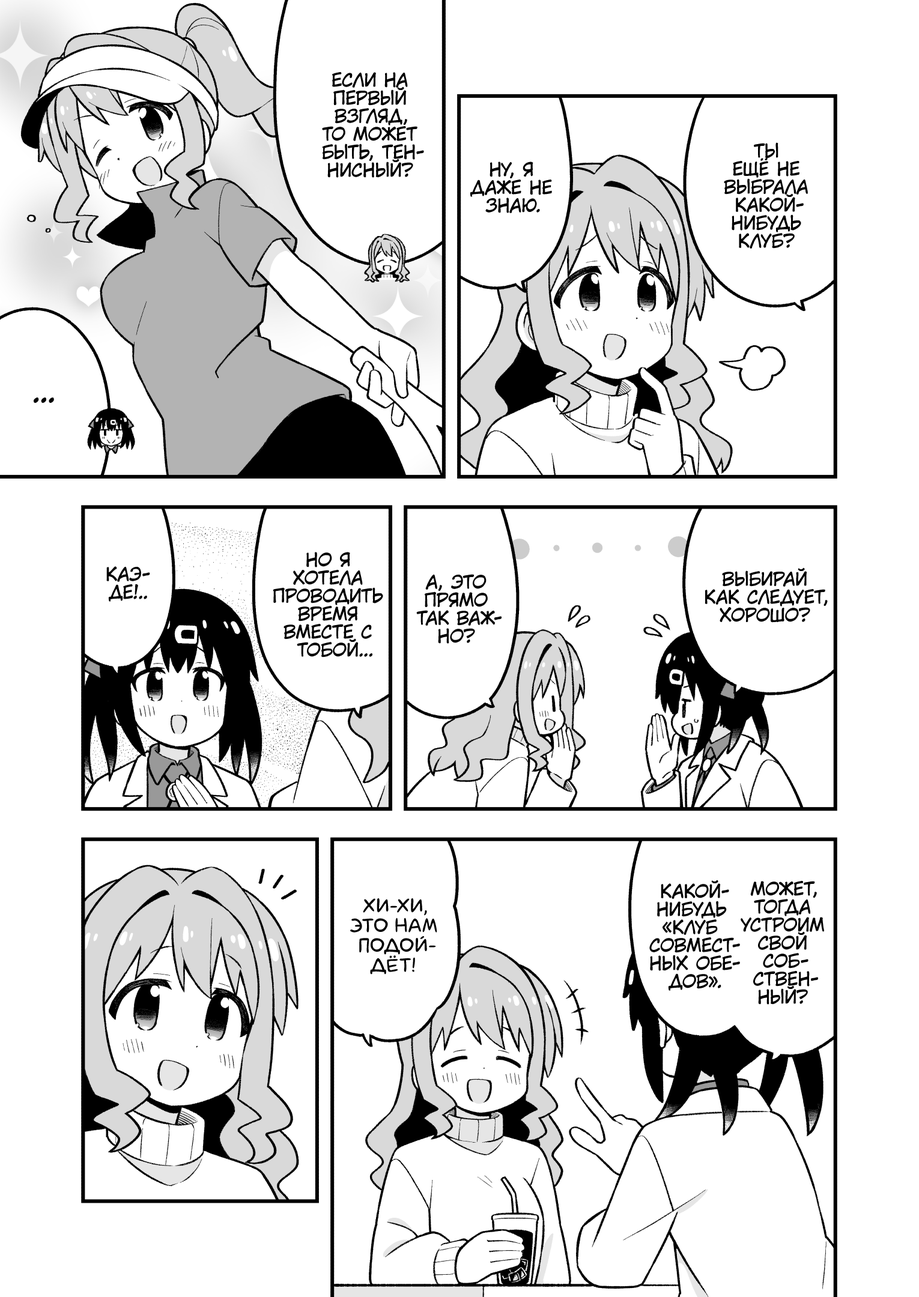
<style>
.page{position:relative;width:919px;height:1297px;background:#ffffff}
.page>*{position:absolute;margin:0}
.t1{font:18px "KuraiVoice2";color:#000000;text-transform:uppercase}
.t2{font:28.8px "KuraiVoice2";color:#000000;text-transform:uppercase}
.t3{font:19.8px "laCartoonerie";color:#000000;text-transform:uppercase}
</style>
<div class="page">
<p class="t1" style="left:322px;top:72px;width:102px;height:106px;text-align:center">Если на<br>первый<br>взгляд,<br>то может<br>быть, тен-<br>нисный?</p>
<p class="t1" style="left:724px;top:142px;width:84px;height:107px;text-align:center">Ты<br>ещё не<br>выбрала<br>какой-<br>нибудь<br>клуб?</p>
<p class="t1" style="left:470px;top:162px;width:82px;height:51px;text-align:center">Ну, я<br>даже не<br>знаю.</p>
<p class="t2" style="left:34px;top:398px;width:20px;height:5px">...</p>
<p class="t1" style="left:273px;top:552px;width:110px;height:106px;text-align:center">Но я<br>хотела<br>проводить<br>время<br>вместе с<br>тобой...</p>
<p class="t1" style="left:106px;top:566px;width:44px;height:36px;text-align:center">Каэ-<br>де!..</p>
<p class="t1" style="left:705px;top:568px;width:123px;height:55px;text-align:center">Выбирай<br>как следует,<br>хорошо?</p>
<p class="t1" style="left:416px;top:574px;width:86px;height:70px;text-align:center">А, это<br>прямо<br>так важ-<br>но?</p>
<p class="t1" style="left:649px;top:880px;width:91px;height:111px;text-align:center">Какой-<br>нибудь<br>«клуб<br>совмест-<br>ных обе-<br>дов».</p>
<p class="t1" style="left:741px;top:881px;width:83px;height:124px;text-align:center">Может,<br>тогда<br>устроим<br>свой<br>соб-<br>ствен-<br>ный?</p>
<p class="t3" style="left:350px;top:899px;width:87px;height:76px;text-align:center">Хи-хи,<br>это нам<br>подой-<br>дёт!</p>
</div>
